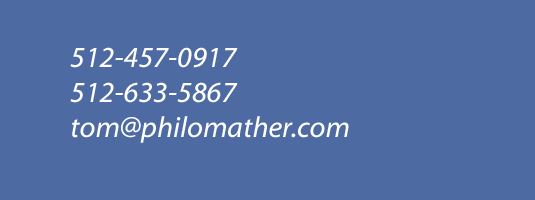
<style>
.page{position:relative;width:535px;height:200px;background:#4d6aa2}
.page>*{position:absolute;margin:0}
.t1{font:29.2px "Myriad-ItWeb";color:#ffffff}
</style>
<div class="page">
<p class="t1" style="left:70px;top:47px;width:279px;height:96px">512-457-0917<br>512-633-5867<br>tom@philomather.com</p>
</div>
